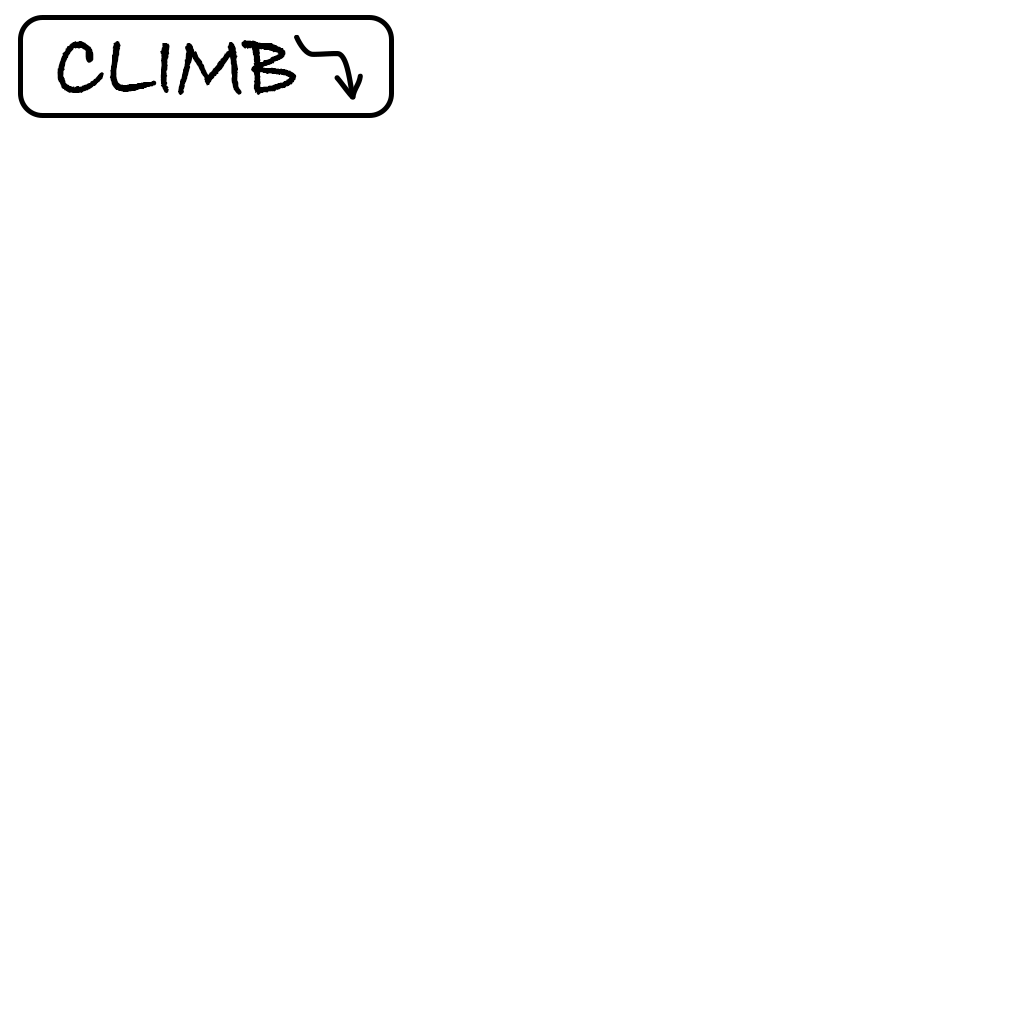
<style>
.page{position:relative;width:1024px;height:1024px;background:#ffffff}
.page>*{position:absolute;margin:0}
.t1{font:95.9px "BradleyHandITCTT-Bold";color:#000000;scale:0.82 1}
</style>
<div class="page">
<p class="t1" style="left:57px;top:40px;width:240px;height:55px">CLIMB</p>
</div>
